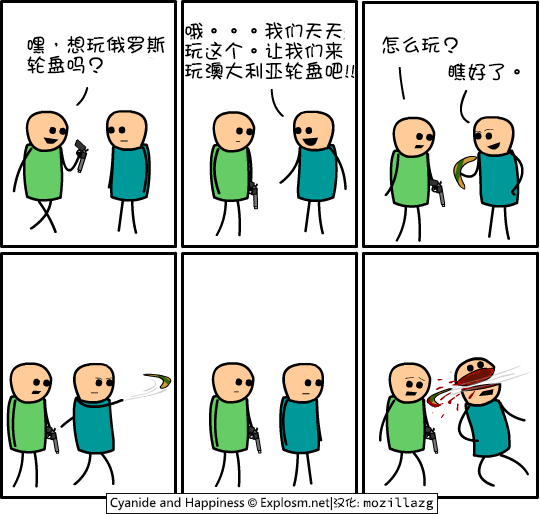
<style>
.page{position:relative;width:540px;height:514px;background:#ffffff}
.page>*{position:absolute;margin:0}
.t1{font:20px/20px "DFGirl";color:#000000}
.t2{font:20px "DFGirl";color:#000000}
</style>
<div class="page">
<p class="t1" style="left:185px;top:22px;width:170px;height:58px">哦。。。我们天天<br>玩这个。让我们来<br>玩澳大利亚轮盘吧!!</p>
<p class="t1" style="left:27px;top:35px;width:138px;height:39px">嘿，想玩俄罗斯<br>轮盘吗？</p>
<p class="t2" style="left:382px;top:36px;width:76px;height:18px">怎么玩？</p>
<p class="t2" style="left:448px;top:63px;width:72px;height:18px">瞧好了。</p>
</div>
